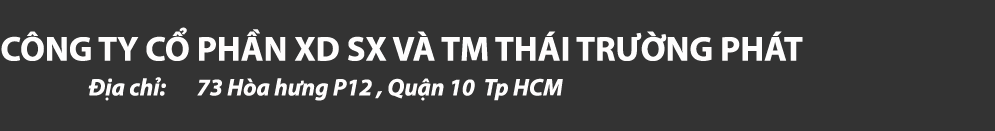
<style>
.page{position:relative;width:995px;height:131px;background:#333333}
.page>*{position:absolute;margin:0}
.t1{font:34.7px "MyriadPro-Bold";color:#fefdfd}
.t2{font:24px "MyriadPro-BoldIt";color:#fefdfd}
</style>
<div class="page">
<p class="t1" style="left:1px;top:27px;width:802px;height:34px">CÔNG TY CỔ PHẦN XD SX VÀ TM THÁI TRƯỜNG PHÁT</p>
<p class="t2" style="left:88px;top:77px;width:475px;height:24px">Địa chỉ:       73 Hòa hưng P12 , Quận 10  Tp HCM</p>
</div>
